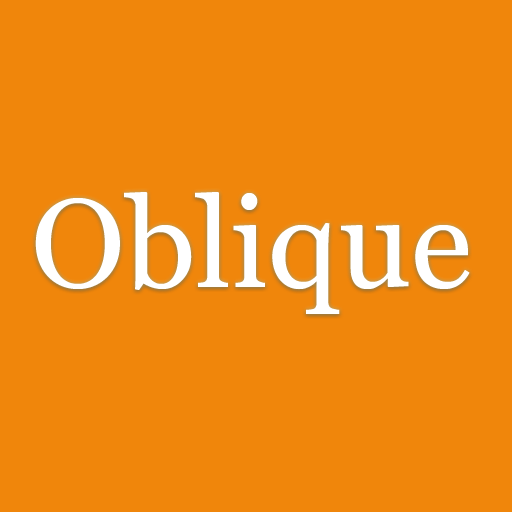
<style>
.page{position:relative;width:512px;height:512px;background:#f0860b}
.page>*{position:absolute;margin:0}
.t1{font:125.8px "Georgia";color:#ffffff}
</style>
<div class="page">
<p class="t1" style="left:35px;top:192px;width:435px;height:122px">Oblique</p>
</div>
